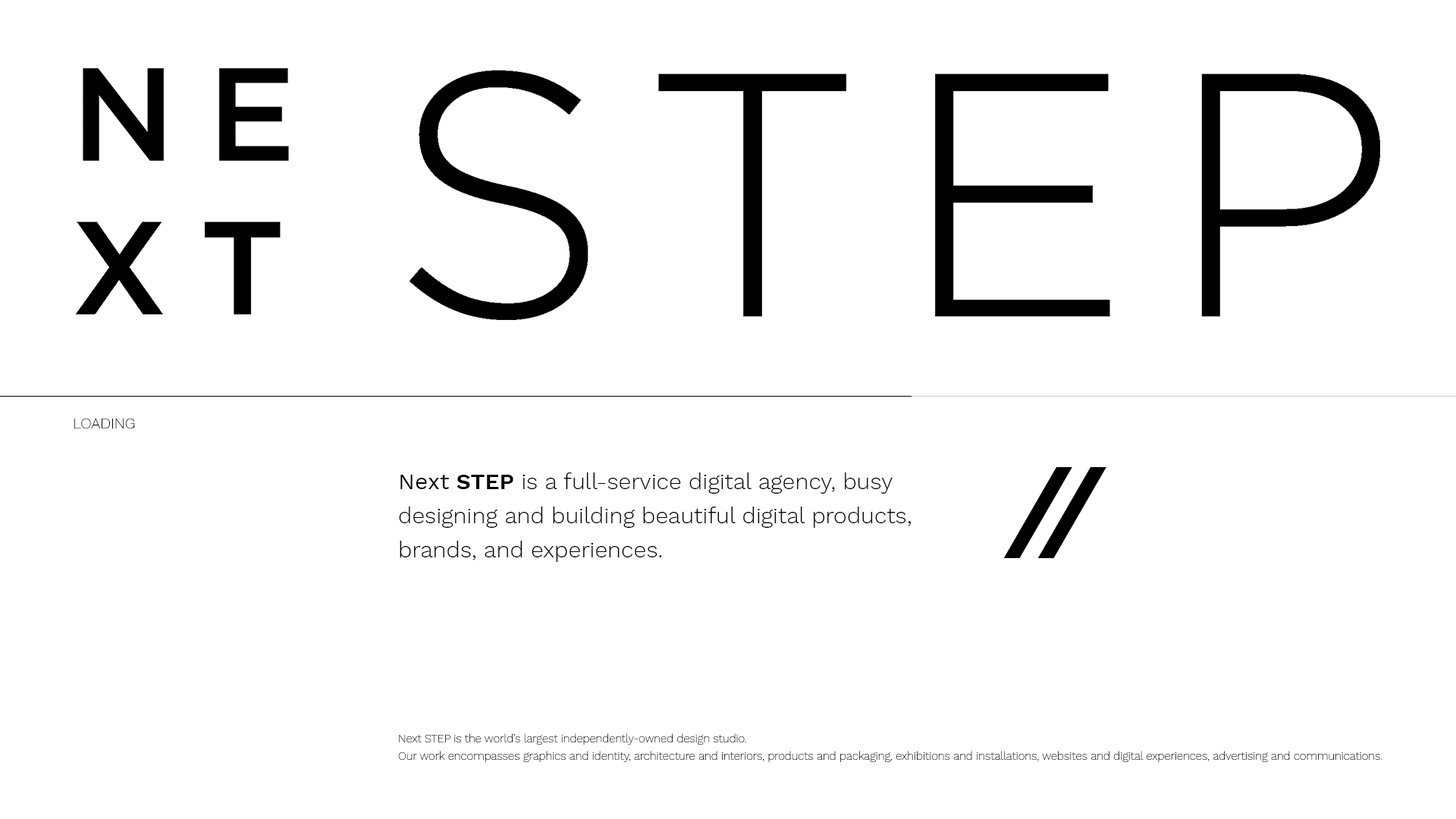
<style>
.page{position:relative;width:1456px;height:819px;background:#ffffff}
.page>*{position:absolute;margin:0}
.t1{font:15.2px "WorkSans-ExtraLight";color:#000000}
.t2{font:22.7px/34.1px "WorkSans-Light";color:#000000}
.t3{font:22.7px/34.1px "WorkSans-Regular";color:#000000}
.t4{font:22.7px/34.1px "WorkSans-SemiBold";color:#000000}
.t5{font:11.4px/17.4px "WorkSans-ExtraLight";color:#000000}
</style>
<div class="page">
<p class="t1" style="left:74px;top:419px;width:61px;height:9px">LOADING</p>
<p class="t2" style="left:399px;top:472px;width:513px;height:90px"><span class="t3">Next </span><span class="t4">STEP</span> is a full-service digital agency, busy designing and building beautiful digital products, brands, and experiences.</p>
<p class="t5" style="left:398px;top:733px;width:984px;height:29px">Next STEP is the world’s largest independently-owned design studio.<br>Our work encompasses graphics and identity, architecture and interiors, products and packaging, exhibitions and installations, websites and digital experiences, advertising and communications.</p>
</div>
